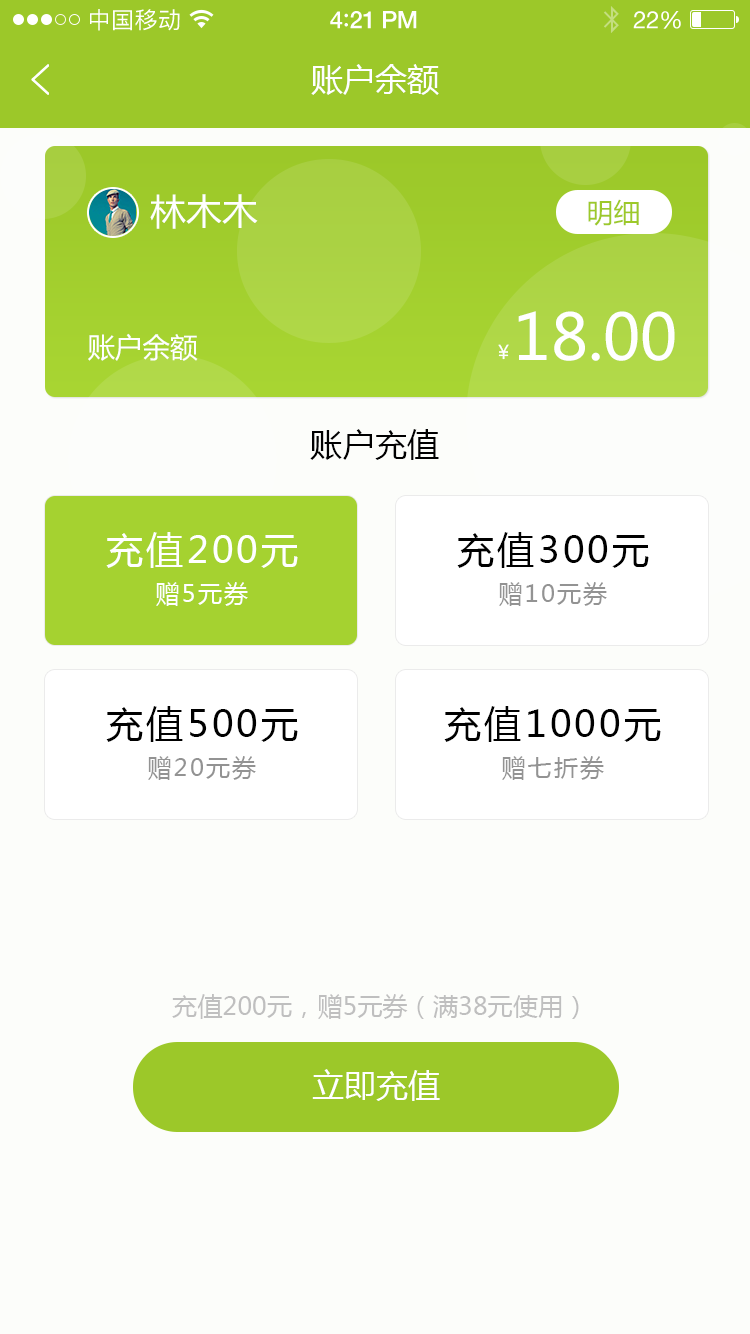
<style>
.page{position:relative;width:750px;height:1334px;background:#fcfdfa}
.page>*{position:absolute;margin:0}
.t1{font:23px "PingFangSC-Regular";letter-spacing:0.02em;color:#ffffff}
.t2{font:24px "HelveticaNeue-Medium";letter-spacing:-0.02em;color:#ffffff}
.t3{font:26px "Avenir-Medium";letter-spacing:-0.02em;color:#ffffff}
.t4{font:24px "HelveticaNeue";letter-spacing:-0.02em;color:#ffffff}
.t5{font:32px "MicrosoftYaHei";color:#ffffff;text-transform:uppercase}
.t6{font:36.1px "MicrosoftYaHei";color:#ffffff;text-transform:uppercase}
.t7{font:26.9px "MicrosoftYaHei";color:#9dc92a;text-transform:uppercase}
.t8{font:63.3px "MicrosoftYaHei";color:#ffffff;text-transform:uppercase}
.t9{font:27.4px "MicrosoftYaHei";color:#ffffff;text-transform:uppercase}
.t10{font:19px "MicrosoftYaHei";color:#ffffff;text-transform:uppercase}
.t11{font:32.5px "MicrosoftYaHei";color:#000000;text-transform:uppercase}
.t12{font:37.4px "MicrosoftYaHei";letter-spacing:0.079em;color:#ffffff;text-transform:uppercase}
.t13{font:37.4px "MicrosoftYaHei";letter-spacing:0.079em;color:#000000;text-transform:uppercase}
.t14{font:24.3px "MicrosoftYaHei";letter-spacing:0.079em;color:#ffffff;text-transform:uppercase}
.t15{font:24.3px "MicrosoftYaHei";letter-spacing:0.079em;color:#939393;text-transform:uppercase}
.t16{font:25.2px "MicrosoftYaHei";color:#bebebe;text-transform:uppercase}
</style>
<div class="page">
<p class="t1" style="left:90px;top:9px;width:90px;height:22px">中国移动</p>
<p class="t2" style="left:330px;top:11px;width:87px;height:18px">4<span class="t3">:</span>21 PM</p>
<p class="t4" style="left:633px;top:11px;width:48px;height:18px">22%</p>
<p class="t5" style="left:311px;top:64px;width:128px;height:31px">账户余额</p>
<p class="t6" style="left:150px;top:194px;width:108px;height:35px">林木木</p>
<p class="t7" style="left:588px;top:199px;width:51px;height:27px">明细</p>
<p class="t8" style="left:518px;top:311px;width:157px;height:50px">18.00</p>
<p class="t9" style="left:88px;top:333px;width:110px;height:28px">账户余额</p>
<p class="t10" style="left:498px;top:344px;width:11px;height:16px">￥</p>
<p class="t11" style="left:310px;top:429px;width:129px;height:31px">账户充值</p>
<p class="t12" style="left:106px;top:532px;width:192px;height:36px">充值200元</p>
<p class="t13" style="left:457px;top:532px;width:192px;height:36px">充值300元</p>
<p class="t14" style="left:156px;top:582px;width:92px;height:24px">赠5元券</p>
<p class="t15" style="left:499px;top:582px;width:108px;height:24px">赠10元券</p>
<p class="t13" style="left:106px;top:706px;width:192px;height:36px">充值500元</p>
<p class="t13" style="left:444px;top:706px;width:217px;height:36px">充值1000元</p>
<p class="t15" style="left:148px;top:756px;width:108px;height:24px">赠20元券</p>
<p class="t15" style="left:502px;top:756px;width:102px;height:24px">赠七折券</p>
<p class="t16" style="left:172px;top:994px;width:407px;height:25px">充值200元，赠5元券（满38元使用）</p>
<p class="t5" style="left:312px;top:1069px;width:128px;height:32px">立即充值</p>
</div>
